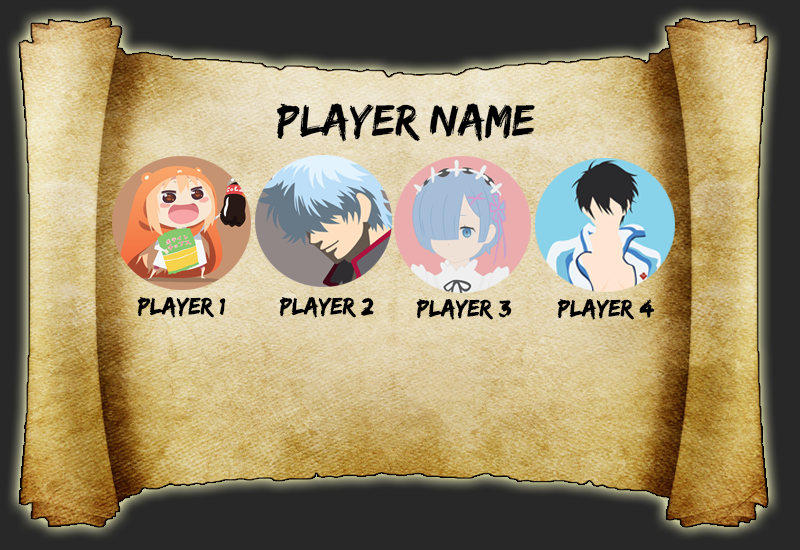
<style>
.page{position:relative;width:800px;height:550px}
.page>*{position:absolute;margin:0}
.t1{font:45.8px "EdoSZ";color:#000000}
.t2{font:24.4px "EdoSZ";color:#000000}
</style>
<div class="page">
<p class="t1" style="left:277px;top:103px;width:258px;height:39px">player name</p>
<p class="t2" style="left:137px;top:297px;width:89px;height:21px">Player 1</p>
<p class="t2" style="left:279px;top:297px;width:95px;height:21px">Player 2</p>
<p class="t2" style="left:416px;top:299px;width:96px;height:21px">Player 3</p>
<p class="t2" style="left:557px;top:299px;width:98px;height:21px">Player 4</p>
</div>
